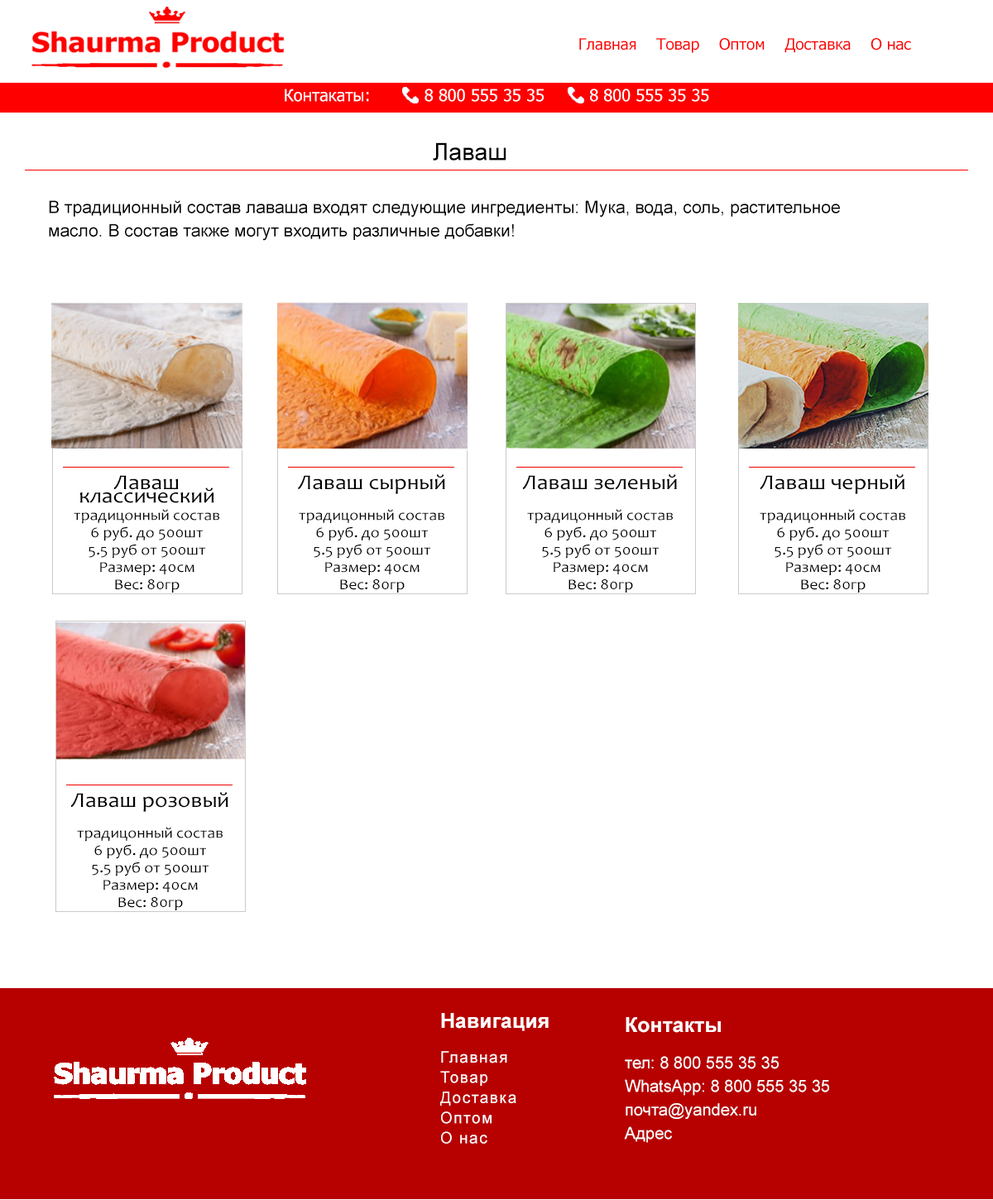
<style>
.page{position:relative;width:993px;height:1200px;background:#ffffff}
.page>*{position:absolute;margin:0}
.t1{font:15.7px "Tahoma";color:#fe0000}
.t2{font:16.6px "Tahoma";color:#ffffff}
.t3{font:24px "ArialMT";color:#000000}
.t4{font:17.4px/23.5px "ArialMT";color:#000000}
.t5{font:15px/17.4px "Candara";color:#000000;scale:1.09 1}
.t6{font:21.3px/13.4px "Candara";color:#000000;scale:1.09 1}
.t7{font:15.7px/20.2px "ArialMT";letter-spacing:0.08em;color:#ffffff}
.t8{font:20.7px/17.4px "Arial-BoldMT";color:#ffffff}
.t9{font:15.7px/17.4px "ArialMT";letter-spacing:0.08em;color:#ffffff}
.t10{font:16.6px/23.5px "ArialMT";color:#ffffff}
.t11{font:20.7px/18.2px "Arial-BoldMT";color:#ffffff}
.t12{font:16.6px/18.2px "ArialMT";color:#ffffff}
</style>
<div class="page">
<p class="t1" style="left:579px;top:38px;width:332px;height:15px">Главная    Товар    Оптом    Доставка    О нас</p>
<p class="t2" style="left:285px;top:89px;width:424px;height:13px">Контакаты:           8 800 555 35 35         8 800 555 35 35</p>
<p class="t3" style="left:433px;top:142px;width:74px;height:19px">Лаваш</p>
<p class="t4" style="left:49px;top:200px;width:791px;height:41px">В традиционный состав лаваша входят следующие ингредиенты: Мука, вода, соль, растительное масло. В состав также могут входить различные добавки!</p>
<p class="t5" style="left:74px;top:475px;width:145px;height:118px;text-align:center"><span class="t6">Лаваш <br>классический<br></span>традицонный состав<br>6 руб. до 500шт<br>5.5 руб от 500шт<br>Размер: 40см<br>Вес: 80гр</p>
<p class="t5" style="left:298px;top:474px;width:147px;height:119px;text-align:center"><span class="t6">Лаваш сырный<br><br></span>традицонный состав<br>6 руб. до 500шт<br>5.5 руб от 500шт<br>Размер: 40см<br>Вес: 80гр</p>
<p class="t5" style="left:523px;top:474px;width:154px;height:119px;text-align:center"><span class="t6">Лаваш зеленый<br><br></span>традицонный состав<br>6 руб. до 500шт<br>5.5 руб от 500шт<br>Размер: 40см<br>Вес: 80гр</p>
<p class="t5" style="left:760px;top:474px;width:146px;height:119px;text-align:center"><span class="t6">Лаваш черный<br><br></span>традицонный состав<br>6 руб. до 500шт<br>5.5 руб от 500шт<br>Размер: 40см<br>Вес: 80гр</p>
<p class="t5" style="left:71px;top:792px;width:157px;height:119px;text-align:center"><span class="t6">Лаваш розовый<br><br></span>традицонный состав<br>6 руб. до 500шт<br>5.5 руб от 500шт<br>Размер: 40см<br>Вес: 80гр</p>
<p class="t7" style="left:440px;top:1013px;width:109px;height:131px"><span class="t8">Навигация<br><br></span><span class="t9">Главная<br></span>Товар <br>Доставка<br>Оптом<br>О нас</p>
<p class="t10" style="left:624px;top:1017px;width:205px;height:126px"><span class="t11">Контакты<br><br></span><span class="t12">тел: 8 800 555 35 35<br></span>WhatsApp: 8 800 555 35 35<br>почта@yandex.ru<br>Адрес</p>
</div>
